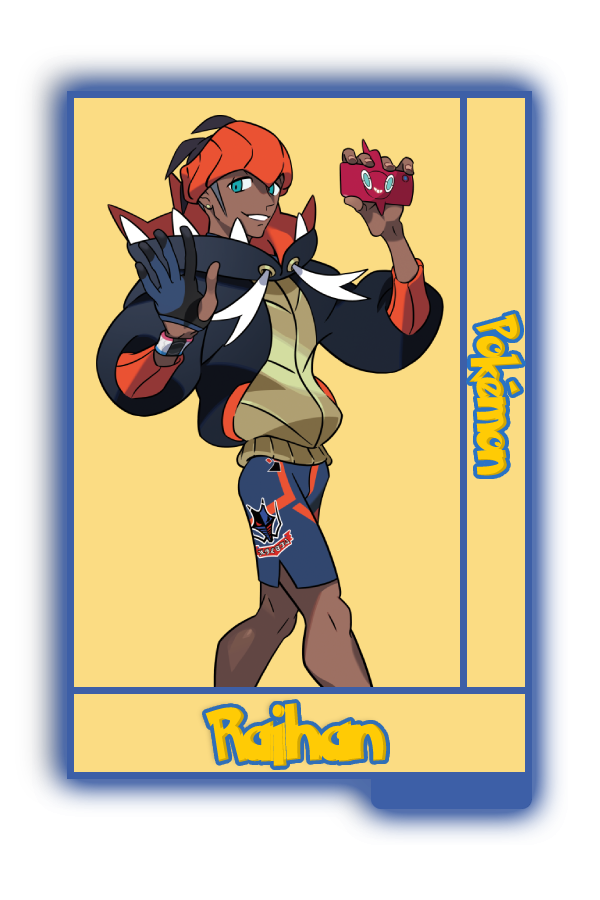
<style>
.page{position:relative;width:600px;height:900px;background:#fbdc83}
.page>*{position:absolute;margin:0}
.t1{font:48.8px "PokemonSolidNormal";color:#ffcb05;scale:0.8 1}
.t2{font:60.1px "PokemonSolidNormal";color:#ffcb05;scale:0.96 1}
</style>
<div class="page">
<p class="t1" style="left:469px;top:313px;width:54px;height:163px;rotate:90deg">Pokémon</p>
<p class="t2" style="left:205px;top:702px;width:182px;height:65px">Raihan</p>
</div>
